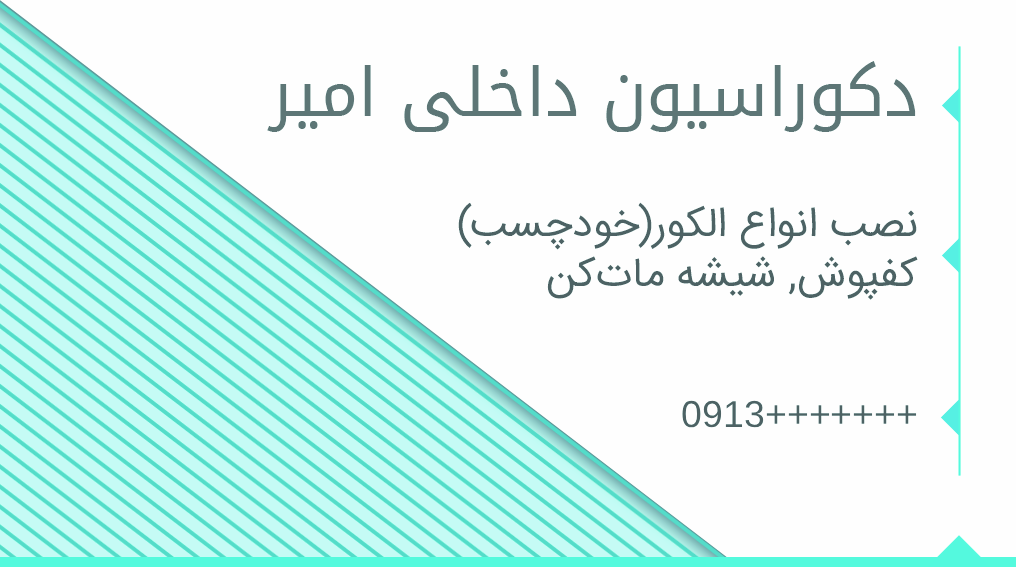
<style>
.page{position:relative;width:1016px;height:567px;background:#fefefe}
.page>*{position:absolute;margin:0}
.t1{font:66.7px "DroidArabicKufi";color:#5d7676}
.t2{font:41.7px "IRANSansWebFaNum";color:#4d6264}
.t3{font:37.5px "ArialMT";color:#4d6264}
</style>
<div class="page">
<p class="t1" style="left:267px;top:61px;width:649px;height:71px">دکوراسیون داخلی امیر</p>
<p class="t2" style="left:458px;top:202px;width:460px;height:98px">نصب انواع الکور(خودچسب)<br>کفپوش, شیشه مات‌کن</p>
<p class="t3" style="left:682px;top:400px;width:235px;height:28px">0913+++++++</p>
</div>
